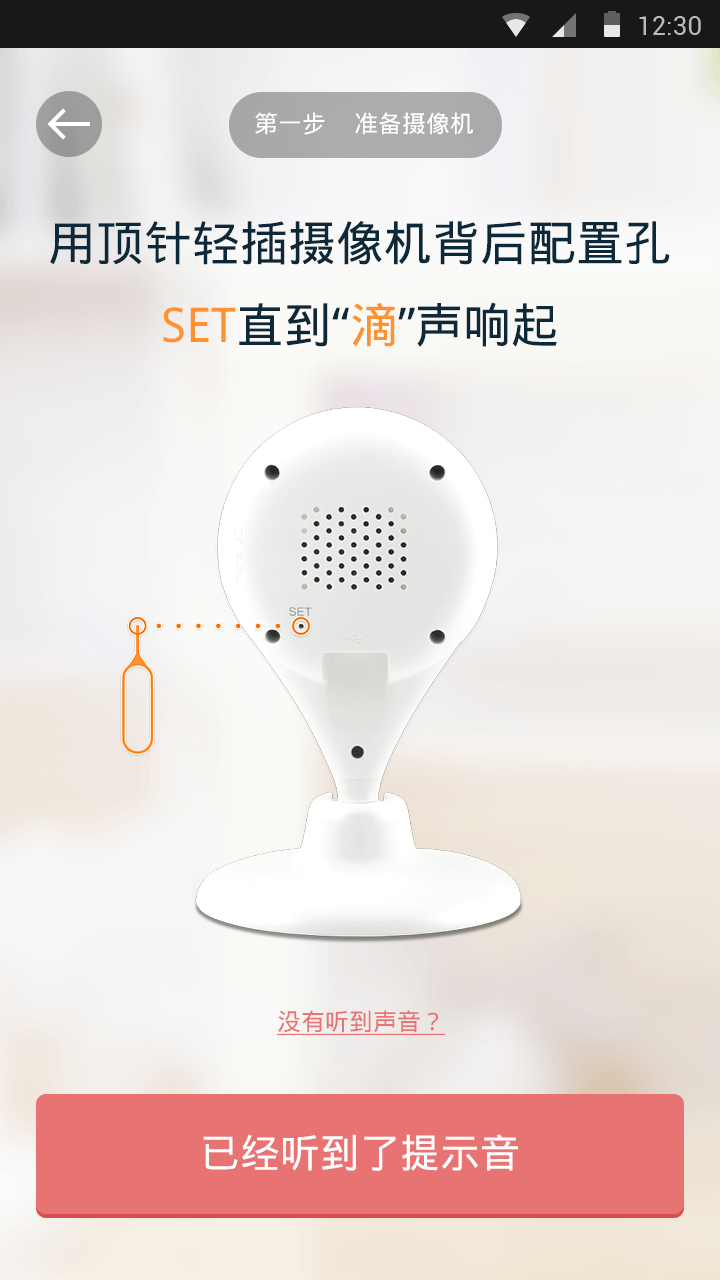
<style>
.page{position:relative;width:720px;height:1280px}
.page>*{position:absolute;margin:0}
.t1{font:24px "DroidSansFallback";color:#ffffff}
.t2{font:48px "DroidSansFallback";color:#0c2839}
.t3{font:48px "DroidSansFallback";color:#fe9232}
.t4{font:24px "DroidSansFallback";color:#e87373;text-decoration:underline}
.t5{font:40px "DroidSansFallback";color:#ffffff}
</style>
<div class="page">
<p class="t1" style="left:255px;top:112px;width:70px;height:23px">第一步</p>
<p class="t1" style="left:355px;top:112px;width:118px;height:23px">准备摄像机</p>
<p class="t2" style="left:50px;top:221px;width:620px;height:44px">用顶针轻插摄像机背后配置孔</p>
<p class="t2" style="left:163px;top:302px;width:394px;height:45px"><span class="t3">SET</span>直到“<span class="t3">滴</span>”声响起</p>
<p class="t4" style="left:277px;top:1010px;width:168px;height:26px">没有听到声音？</p>
<p class="t5" style="left:203px;top:1134px;width:315px;height:37px">已经听到了提示音</p>
</div>
